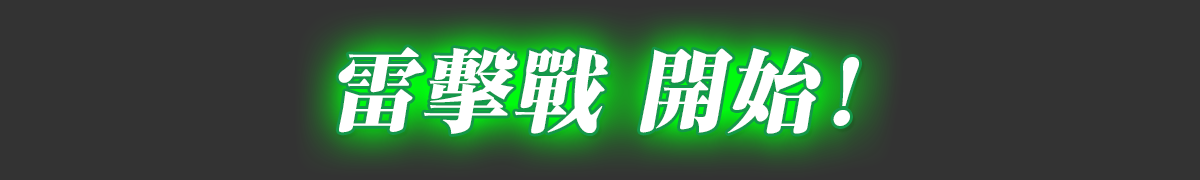
<style>
.page{position:relative;width:1200px;height:180px;background:#333333}
.page>*{position:absolute;margin:0}
.t1{font:90px "RyuminPro-ExHeavy";letter-spacing:0.02em;color:#ffffff;font-style:italic}
</style>
<div class="page">
<p class="t1" style="left:338px;top:47px;width:521px;height:87px">雷擊戰 開始！</p>
</div>
